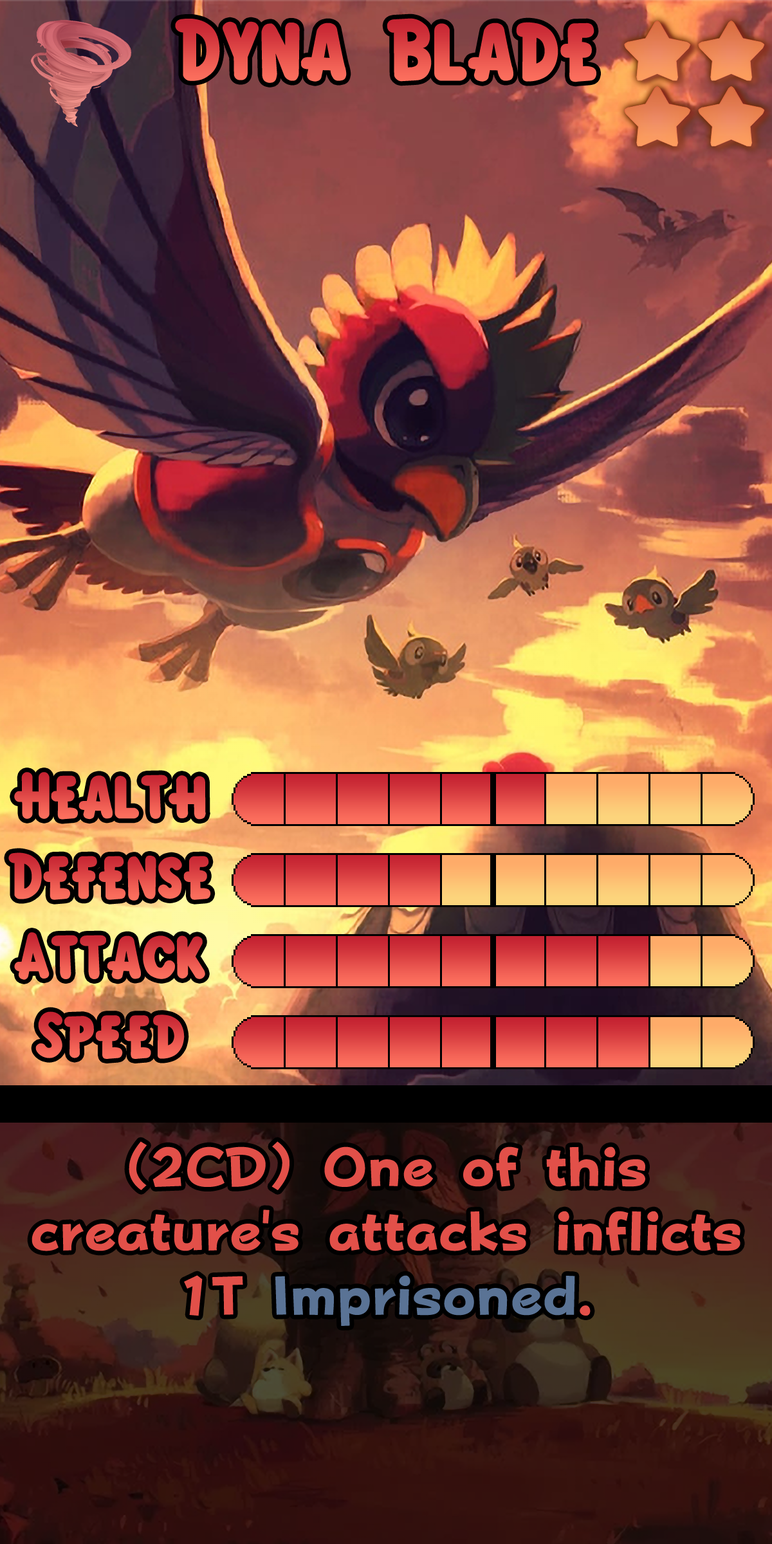
<style>
.page{position:relative;width:772px;height:1544px}
.page>*{position:absolute;margin:0}
.t1{font:135.1px "KirbyClassic"}
.t2{font:100.4px "KirbyClassic"}
.t3{font:93.3px/64.3px "FOTPopHappinessStrp-ExtraBold";color:#e25049}
.t4{font:93.3px/64.3px "FOTPopHappinessStrp-ExtraBold";color:#5a7395}
</style>
<div class="page">
<p class="t1" style="left:175px;top:18px;width:421px;height:65px">Dyna Blade</p>
<p class="t2" style="left:14px;top:772px;width:192px;height:48px">Health</p>
<p class="t2" style="left:8px;top:853px;width:203px;height:48px">Defense</p>
<p class="t2" style="left:14px;top:932px;width:191px;height:48px">Attack</p>
<p class="t2" style="left:35px;top:1012px;width:150px;height:47px">Speed</p>
<p class="t3" style="left:32px;top:1141px;width:709px;height:185px;text-align:center">(2CD) One of this creature's attacks inflicts 1T <span class="t4">Imprisoned</span>.</p>
</div>
